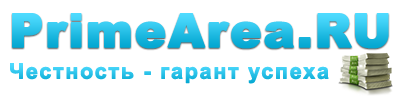
<style>
.page{position:relative;width:400px;height:100px;background:#ffffff}
.page>*{position:absolute;margin:0}
.t1{font:46.7px "Arial-Black";letter-spacing:0.02em;font-weight:bold}
.t2{font:21.3px "Arial-BoldMT";letter-spacing:0.06em;color:#2fc5ec;font-weight:bold}
</style>
<div class="page">
<p class="t1" style="left:12px;top:13px;width:377px;height:36px">PrimeArea.RU</p>
<p class="t2" style="left:10px;top:63px;width:319px;height:21px">Честность - гарант успеха</p>
</div>
